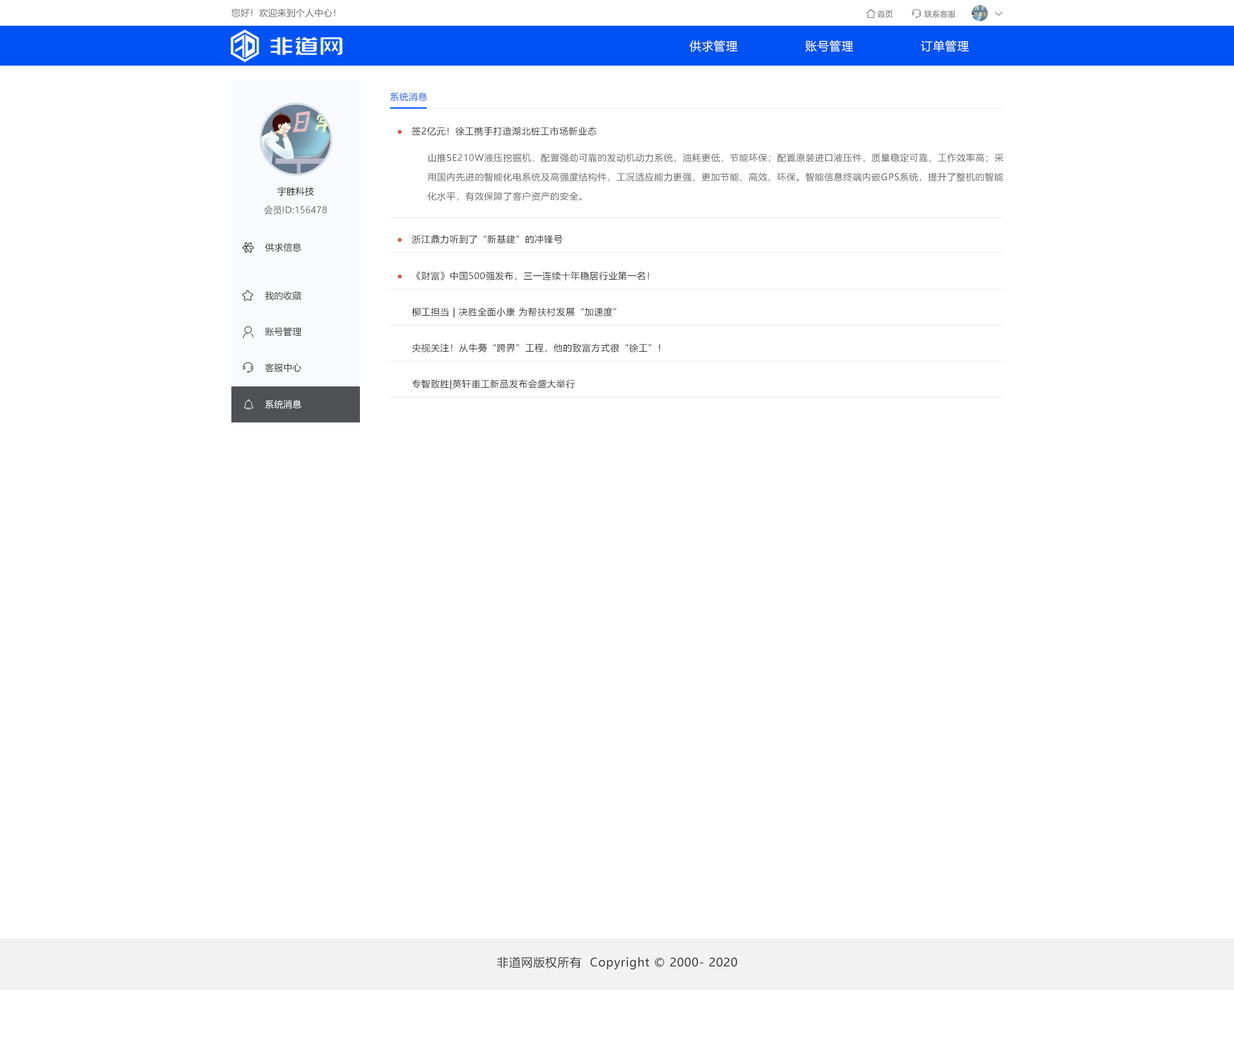
<style>
.page{position:relative;width:1234px;height:1050px;background:#ffffff}
.page>*{position:absolute;margin:0}
.t1{font:9px "MicrosoftYaHei";letter-spacing:0.022em;color:#666666}
.t2{font:7.7px "MicrosoftYaHei";letter-spacing:0.022em;color:#666666}
.t3{font:11.6px "MicrosoftYaHei";letter-spacing:0.05em;color:#ffffff}
.t4{font:9px "MicrosoftYaHei";letter-spacing:0.05em;color:#0152f5}
.t5{font:9px "MicrosoftYaHei";letter-spacing:0.05em;color:#333333}
.t6{font:9px/19.3px "MicrosoftYaHei";letter-spacing:0.05em;color:#666666}
.t7{font:9px "MicrosoftYaHei";letter-spacing:0.022em;color:#141414}
.t8{font:9px "MicrosoftYaHei";letter-spacing:0.022em;color:#333333}
.t9{font:9px "MicrosoftYaHei";letter-spacing:0.022em;color:#ffffff}
.t10{font:11.6px "MicrosoftYaHei";letter-spacing:0.05em;color:#333333}
</style>
<div class="page">
<p class="t1" style="left:231px;top:8px;width:105px;height:9px">您好！欢迎来到个人中心！</p>
<p class="t2" style="left:878px;top:10px;width:15px;height:8px">首页</p>
<p class="t2" style="left:924px;top:10px;width:32px;height:8px">联系客服</p>
<p class="t3" style="left:689px;top:40px;width:49px;height:12px">供求管理</p>
<p class="t3" style="left:806px;top:40px;width:48px;height:12px">账号管理</p>
<p class="t3" style="left:921px;top:40px;width:48px;height:12px">订单管理</p>
<p class="t4" style="left:390px;top:92px;width:38px;height:10px">系统消息</p>
<p class="t5" style="left:411px;top:127px;width:186px;height:9px">签2亿元！徐工携手打造湖北桩工市场新业态</p>
<p class="t6" style="left:428px;top:153px;width:576px;height:48px">山推SE210W液压挖掘机，配置强劲可靠的发动机动力系统，油耗更低，节能环保；配置原装进口液压件，质量稳定可靠，工作效率高；采<br>用国内先进的智能化电系统及高强度结构件，工况适应能力更强，更加节能、高效、环保。智能信息终端内嵌GPS系统，提升了整机的智能<br>化水平，有效保障了客户资产的安全。</p>
<p class="t7" style="left:277px;top:186px;width:37px;height:10px">宇胜科技</p>
<p class="t1" style="left:264px;top:206px;width:63px;height:9px">会员ID:156478</p>
<p class="t8" style="left:265px;top:243px;width:37px;height:9px">供求信息</p>
<p class="t5" style="left:411px;top:235px;width:152px;height:9px">浙江鼎力听到了“新基建”的冲锋号</p>
<p class="t5" style="left:416px;top:271px;width:233px;height:9px">《财富》中国500强发布，三一连续十年稳居行业第一名！</p>
<p class="t8" style="left:265px;top:291px;width:37px;height:9px">我的收藏</p>
<p class="t5" style="left:412px;top:307px;width:204px;height:11px">柳工担当 | 决胜全面小康 为帮扶村发展“加速度”</p>
<p class="t8" style="left:265px;top:327px;width:37px;height:9px">账号管理</p>
<p class="t5" style="left:412px;top:343px;width:249px;height:9px">央视关注！从牛蒡“跨界”工程，他的致富方式很“徐工”！</p>
<p class="t8" style="left:265px;top:363px;width:37px;height:9px">客服中心</p>
<p class="t5" style="left:412px;top:379px;width:163px;height:11px">专智致胜|英轩重工新品发布会盛大举行</p>
<p class="t9" style="left:265px;top:400px;width:37px;height:9px">系统消息</p>
<p class="t10" style="left:497px;top:956px;width:240px;height:13px">非道网版权所有  Copyright © 2000- 2020</p>
</div>
